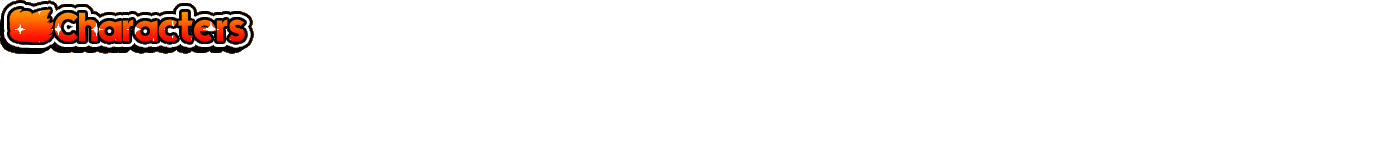
<style>
.page{position:relative;width:1386px;height:155px;background:#ffffff}
.page>*{position:absolute;margin:0}
.t1{font:40px "Mouser"}
</style>
<div class="page">
<p class="t1" style="left:54px;top:11px;width:191px;height:31px">Characters</p>
<p class="t1" style="left:54px;top:11px;width:191px;height:31px">Characters</p>
</div>
